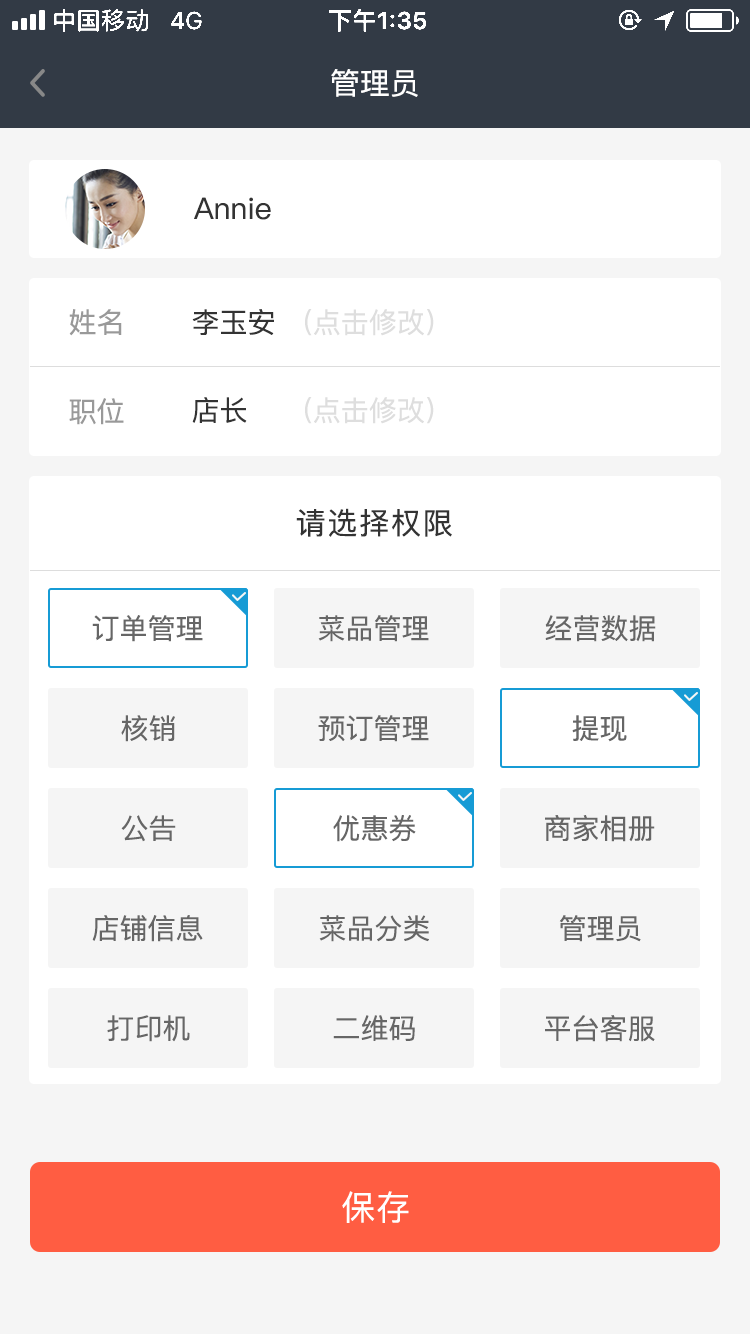
<style>
.page{position:relative;width:750px;height:1334px;background:#ffffff}
.page>*{position:absolute;margin:0}
.t1{font:30px "PingFangSC-Regular";color:#ffffff}
.t2{font:30px "PingFangSC-Regular";color:#333333}
.t3{font:28px "PingFangSC-Regular";color:#999999}
.t4{font:28px "PingFangSC-Regular";color:#dedede}
.t5{font:28px "PingFangSC-Regular";color:#333333}
.t6{font:30px "PingFangSC-Regular";letter-spacing:0.06em;color:#333333}
.t7{font:28px "PingFangSC-Regular";color:#666666}
.t8{font:34px "PingFang-SC-Medium";letter-spacing:0.02em;color:#ffffff}
</style>
<div class="page">
<p class="t1" style="left:331px;top:69px;width:87px;height:28px">管理员</p>
<p class="t2" style="left:194px;top:197px;width:77px;height:23px">Annie</p>
<p class="t3" style="left:69px;top:309px;width:53px;height:27px">姓名</p>
<p class="t4" style="left:192px;top:309px;width:242px;height:27px"><span class="t5">李玉安   </span>(点击修改）</p>
<p class="t3" style="left:69px;top:398px;width:55px;height:27px">职位</p>
<p class="t4" style="left:192px;top:397px;width:242px;height:27px"><span class="t5">店长      </span>(点击修改）</p>
<p class="t6" style="left:296px;top:508px;width:156px;height:29px">请选择权限</p>
<p class="t7" style="left:92px;top:615px;width:111px;height:27px">订单管理</p>
<p class="t7" style="left:318px;top:615px;width:111px;height:27px">菜品管理</p>
<p class="t7" style="left:545px;top:615px;width:111px;height:27px">经营数据</p>
<p class="t7" style="left:121px;top:715px;width:54px;height:27px">核销</p>
<p class="t7" style="left:318px;top:715px;width:111px;height:27px">预订管理</p>
<p class="t7" style="left:572px;top:715px;width:55px;height:27px">提现</p>
<p class="t7" style="left:121px;top:815px;width:55px;height:27px">公告</p>
<p class="t7" style="left:333px;top:815px;width:83px;height:27px">优惠券</p>
<p class="t7" style="left:545px;top:815px;width:110px;height:27px">商家相册</p>
<p class="t7" style="left:92px;top:915px;width:111px;height:27px">店铺信息</p>
<p class="t7" style="left:319px;top:915px;width:110px;height:27px">菜品分类</p>
<p class="t7" style="left:559px;top:915px;width:82px;height:27px">管理员</p>
<p class="t7" style="left:107px;top:1015px;width:83px;height:27px">打印机</p>
<p class="t7" style="left:333px;top:1015px;width:82px;height:26px">二维码</p>
<p class="t7" style="left:545px;top:1015px;width:110px;height:27px">平台客服</p>
<p class="t8" style="left:342px;top:1191px;width:67px;height:32px">保存</p>
</div>
